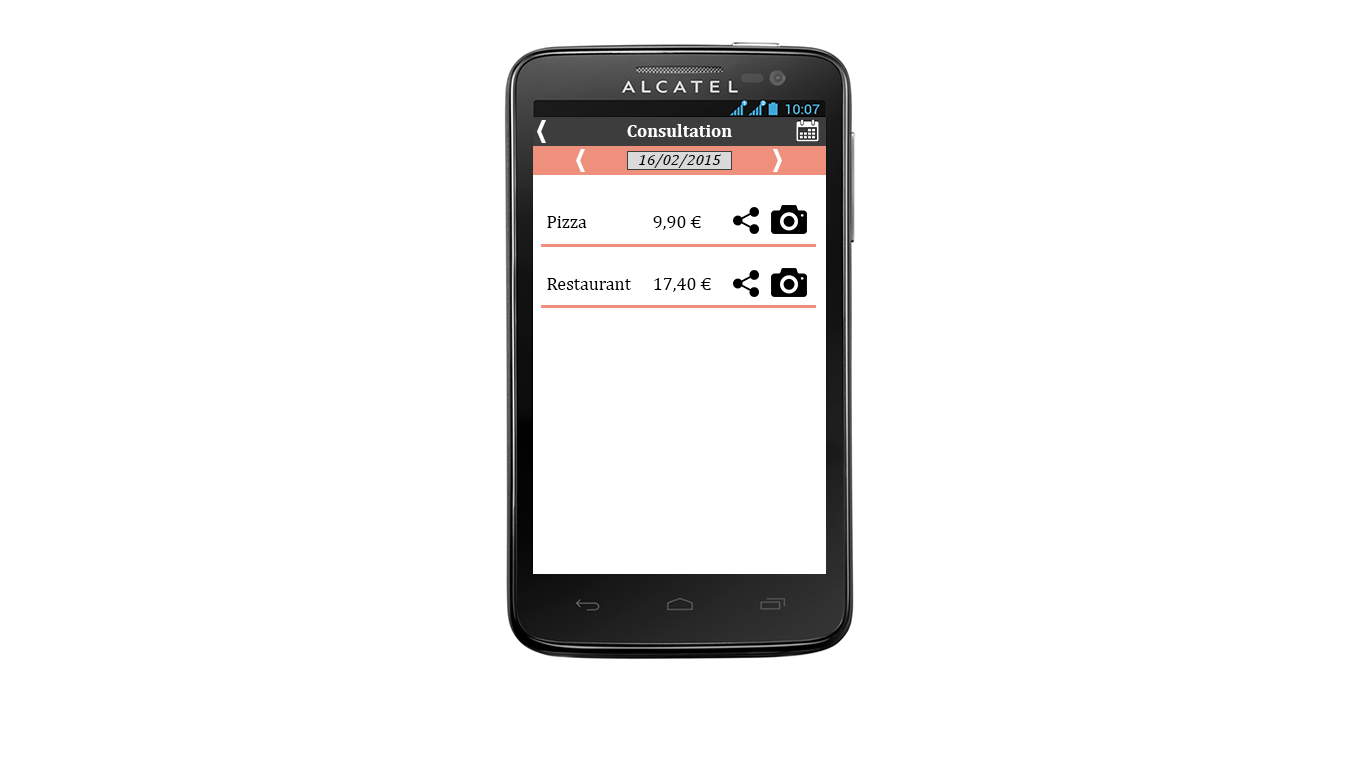
<style>
.page{position:relative;width:1366px;height:768px;background:#ffffff}
.page>*{position:absolute;margin:0}
.t1{font:18px "Cambria-Bold";color:#ffffff}
.t2{font:16px "Cambria-Italic";color:#000000}
.t3{font:18px "Cambria";color:#000000}
</style>
<div class="page">
<p class="t1" style="left:627px;top:124px;width:105px;height:13px">Consultation</p>
<p class="t2" style="left:639px;top:154px;width:82px;height:14px">16/02/2015</p>
<p class="t3" style="left:547px;top:216px;width:40px;height:12px">Pizza</p>
<p class="t3" style="left:653px;top:216px;width:48px;height:14px">9,90 €</p>
<p class="t3" style="left:547px;top:278px;width:84px;height:12px">Restaurant</p>
<p class="t3" style="left:654px;top:278px;width:57px;height:14px">17,40 €</p>
</div>
